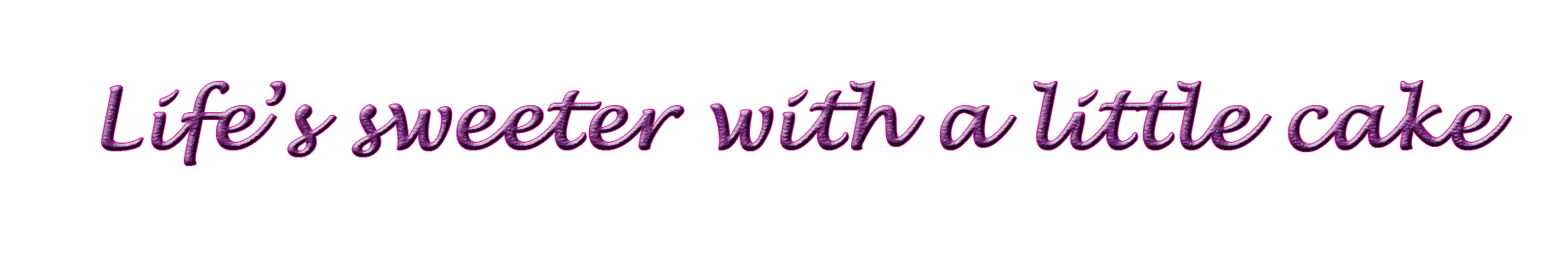
<style>
.page{position:relative;width:1568px;height:261px;background:#ffffff}
.page>*{position:absolute;margin:0}
.t1{font:78.4px "LucidaHandwriting-Italic";font-weight:bold}
</style>
<div class="page">
<p class="t1" style="left:102px;top:81px;width:1409px;height:85px">Life’s sweeter with a little cake</p>
</div>
